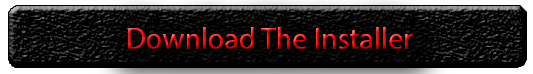
<style>
.page{position:relative;width:533px;height:74px;background:#000000}
.page>*{position:absolute;margin:0}
.t1{font:30px "MyriadPro-Regular"}
</style>
<div class="page">
<p class="t1" style="left:128px;top:27px;width:285px;height:22px">Download The Installer</p>
</div>
